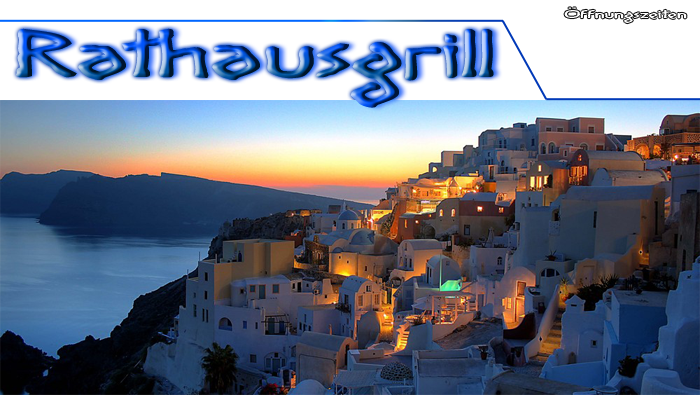
<style>
.page{position:relative;width:700px;height:395px}
.page>*{position:absolute;margin:0}
.t1{font:59.9px "Diogenes";scale:1.85 1}
</style>
<div class="page">
<p class="t1" style="left:16px;top:28px;width:478px;height:80px">Rathausgrill</p>
</div>
